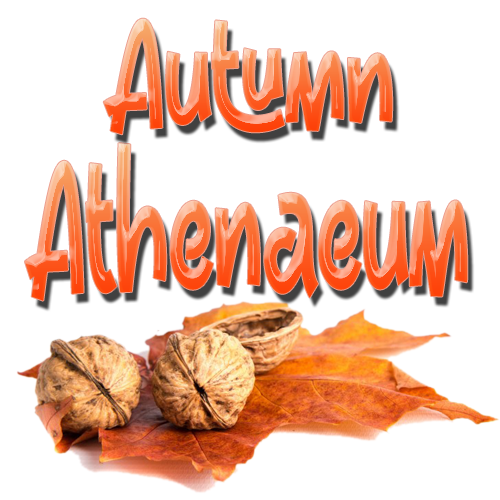
<style>
.page{position:relative;width:500px;height:500px;background:#ffffff}
.page>*{position:absolute;margin:0}
.t1{font:154.8px "Foodpacker";scale:0.71 1}
.t2{font:187.3px "Foodpacker";scale:0.59 1}
</style>
<div class="page">
<p class="t1" style="left:103px;top:18px;width:290px;height:117px">Autumn</p>
<p class="t2" style="left:25px;top:143px;width:443px;height:158px">Athenaeum</p>
</div>
